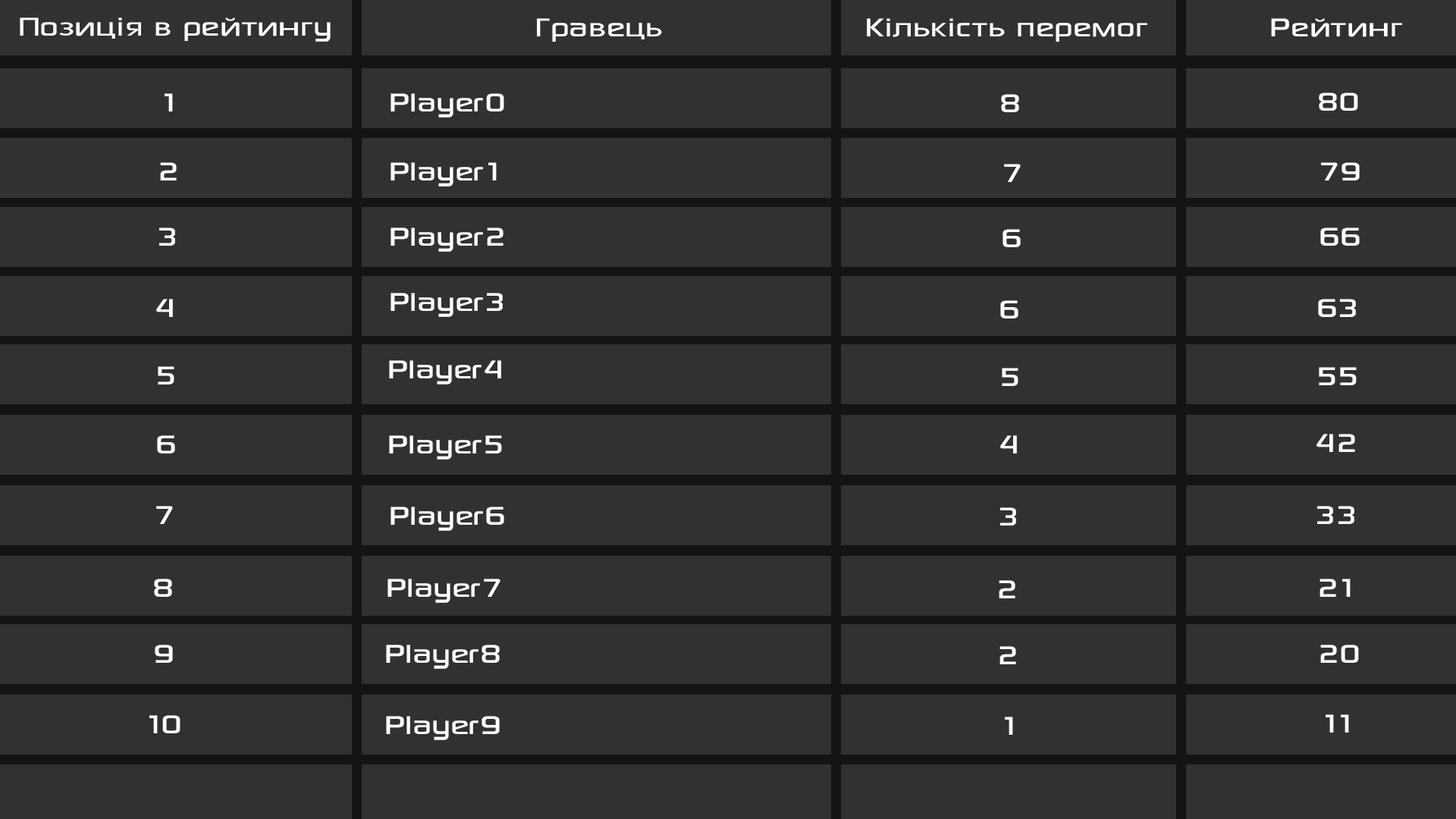
<style>
.page{position:relative;width:1456px;height:819px;background:#313131}
.page>*{position:absolute;margin:0}
.t1{font:36.4px "SonySketchEF";color:#ffffff}
</style>
<div class="page">
<p class="t1" style="left:20px;top:17px;width:311px;height:25px">Позиція в рейтингу</p>
<p class="t1" style="left:537px;top:18px;width:125px;height:24px">Гравець</p>
<p class="t1" style="left:867px;top:18px;width:280px;height:24px">Кількість перемог</p>
<p class="t1" style="left:1271px;top:18px;width:131px;height:19px">Рейтинг</p>
<p class="t1" style="left:165px;top:93px;width:8px;height:18px">1</p>
<p class="t1" style="left:391px;top:93px;width:113px;height:25px">Player0</p>
<p class="t1" style="left:1001px;top:94px;width:18px;height:18px">8</p>
<p class="t1" style="left:1319px;top:93px;width:39px;height:18px">80</p>
<p class="t1" style="left:160px;top:162px;width:17px;height:18px">2</p>
<p class="t1" style="left:391px;top:162px;width:106px;height:25px">Player1</p>
<p class="t1" style="left:1004px;top:164px;width:17px;height:18px">7</p>
<p class="t1" style="left:1321px;top:162px;width:39px;height:18px">79</p>
<p class="t1" style="left:159px;top:227px;width:16px;height:19px">3</p>
<p class="t1" style="left:391px;top:227px;width:113px;height:25px">Player2</p>
<p class="t1" style="left:1003px;top:229px;width:18px;height:18px">6</p>
<p class="t1" style="left:1320px;top:227px;width:40px;height:19px">66</p>
<p class="t1" style="left:391px;top:293px;width:112px;height:24px">Player3</p>
<p class="t1" style="left:156px;top:299px;width:17px;height:18px">4</p>
<p class="t1" style="left:1000px;top:300px;width:18px;height:18px">6</p>
<p class="t1" style="left:1318px;top:299px;width:38px;height:18px">63</p>
<p class="t1" style="left:389px;top:360px;width:112px;height:24px">Player4</p>
<p class="t1" style="left:158px;top:366px;width:16px;height:18px">5</p>
<p class="t1" style="left:1002px;top:368px;width:16px;height:18px">5</p>
<p class="t1" style="left:1319px;top:367px;width:38px;height:18px">55</p>
<p class="t1" style="left:157px;top:435px;width:18px;height:18px">6</p>
<p class="t1" style="left:389px;top:435px;width:113px;height:25px">Player5</p>
<p class="t1" style="left:1000px;top:435px;width:17px;height:18px">4</p>
<p class="t1" style="left:1316px;top:434px;width:39px;height:18px">42</p>
<p class="t1" style="left:156px;top:506px;width:17px;height:18px">7</p>
<p class="t1" style="left:391px;top:507px;width:113px;height:24px">Player6</p>
<p class="t1" style="left:1000px;top:507px;width:16px;height:19px">3</p>
<p class="t1" style="left:1317px;top:506px;width:37px;height:18px">33</p>
<p class="t1" style="left:154px;top:579px;width:18px;height:18px">8</p>
<p class="t1" style="left:388px;top:579px;width:112px;height:24px">Player7</p>
<p class="t1" style="left:999px;top:580px;width:16px;height:18px">2</p>
<p class="t1" style="left:1319px;top:579px;width:32px;height:18px">21</p>
<p class="t1" style="left:155px;top:645px;width:18px;height:18px">9</p>
<p class="t1" style="left:386px;top:645px;width:114px;height:24px">Player8</p>
<p class="t1" style="left:999px;top:646px;width:17px;height:18px">2</p>
<p class="t1" style="left:1320px;top:645px;width:39px;height:18px">20</p>
<p class="t1" style="left:149px;top:715px;width:31px;height:18px">10</p>
<p class="t1" style="left:386px;top:716px;width:114px;height:24px">Player9</p>
<p class="t1" style="left:1005px;top:717px;width:8px;height:18px">1</p>
<p class="t1" style="left:1326px;top:714px;width:23px;height:19px">11</p>
</div>
